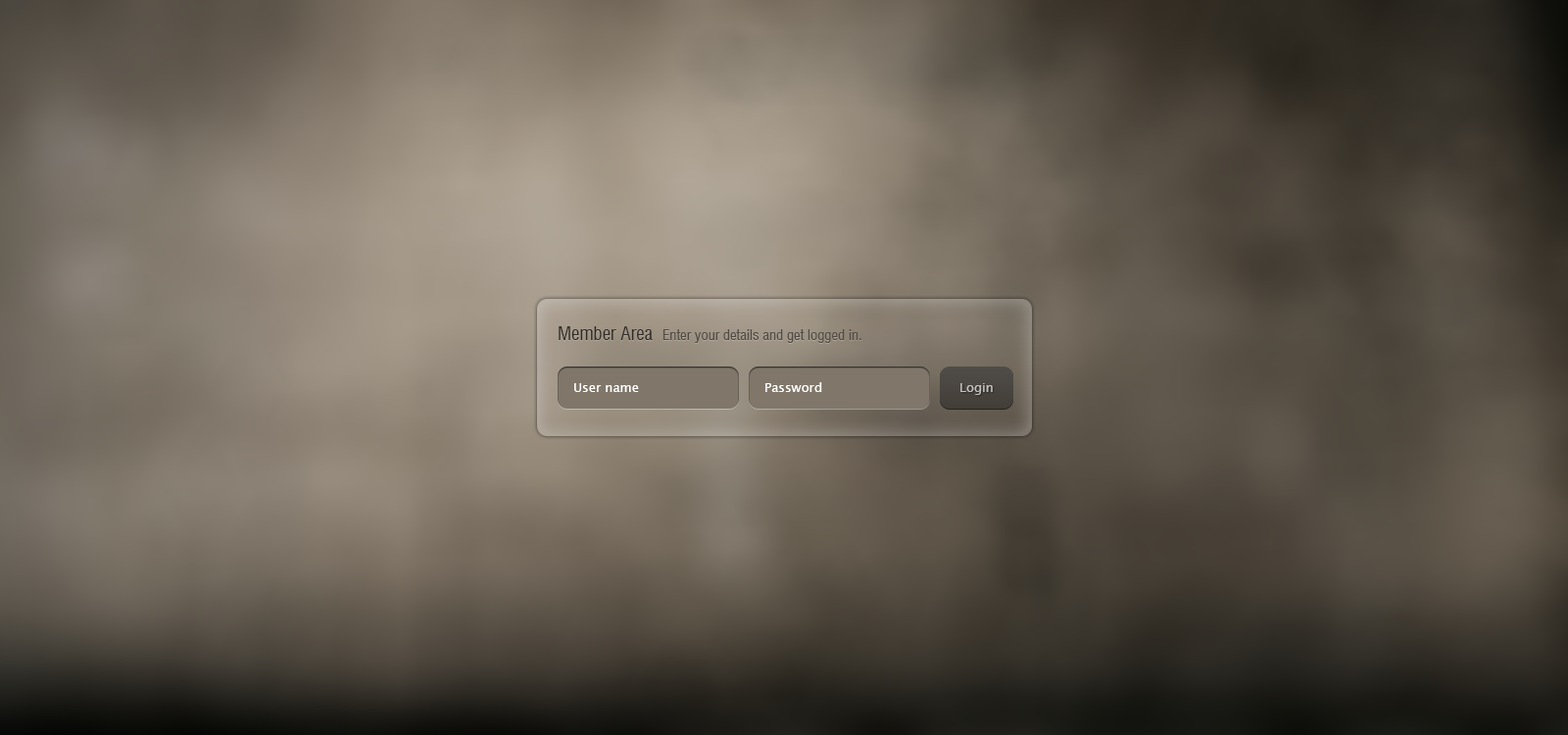
<style>
.page{position:relative;width:1568px;height:735px}
.page>*{position:absolute;margin:0}
.t1{font:18.6px "Swiss721BT-RomanCondensed";color:#2f2a24}
.t2{font:14.7px "Swiss721BT-RomanCondensed";color:#534c44}
.t3{font:12.7px "LucidaSansUnicode";color:#ffffff}
.t4{font:12.7px "LucidaSansUnicode";color:#c3c1be}
</style>
<div class="page">
<p class="t1" style="left:559px;top:326px;width:94px;height:14px">Member Area</p>
<p class="t2" style="left:662px;top:329px;width:199px;height:14px">Enter your details and get logged in.</p>
<p class="t3" style="left:574px;top:383px;width:65px;height:9px">User name</p>
<p class="t3" style="left:765px;top:382px;width:57px;height:10px">Password</p>
<p class="t4" style="left:960px;top:383px;width:33px;height:12px">Login</p>
</div>
